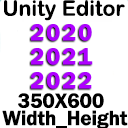
<style>
.page{position:relative;width:128px;height:128px;background:#ffffff}
.page>*{position:absolute;margin:0}
.t1{font:21.3px "ArialRoundedMTBold";color:#000000}
.t2{font:24px/24px "FranklinGothic-Demi";letter-spacing:0.08em;color:#ae00ff}
.t3{font:21.3px/17.3px "FranklinGothic-Demi";letter-spacing:-0.01em;color:#000000}
</style>
<div class="page">
<p class="t1" style="left:4px;top:0px;width:121px;height:21px">Unity Editor</p>
<p class="t2" style="left:31px;top:24px;width:62px;height:65px">2020<br>2021<br>2022</p>
<p class="t3" style="left:2px;top:93px;width:126px;height:36px">350X600 <br>Width_Height</p>
</div>
